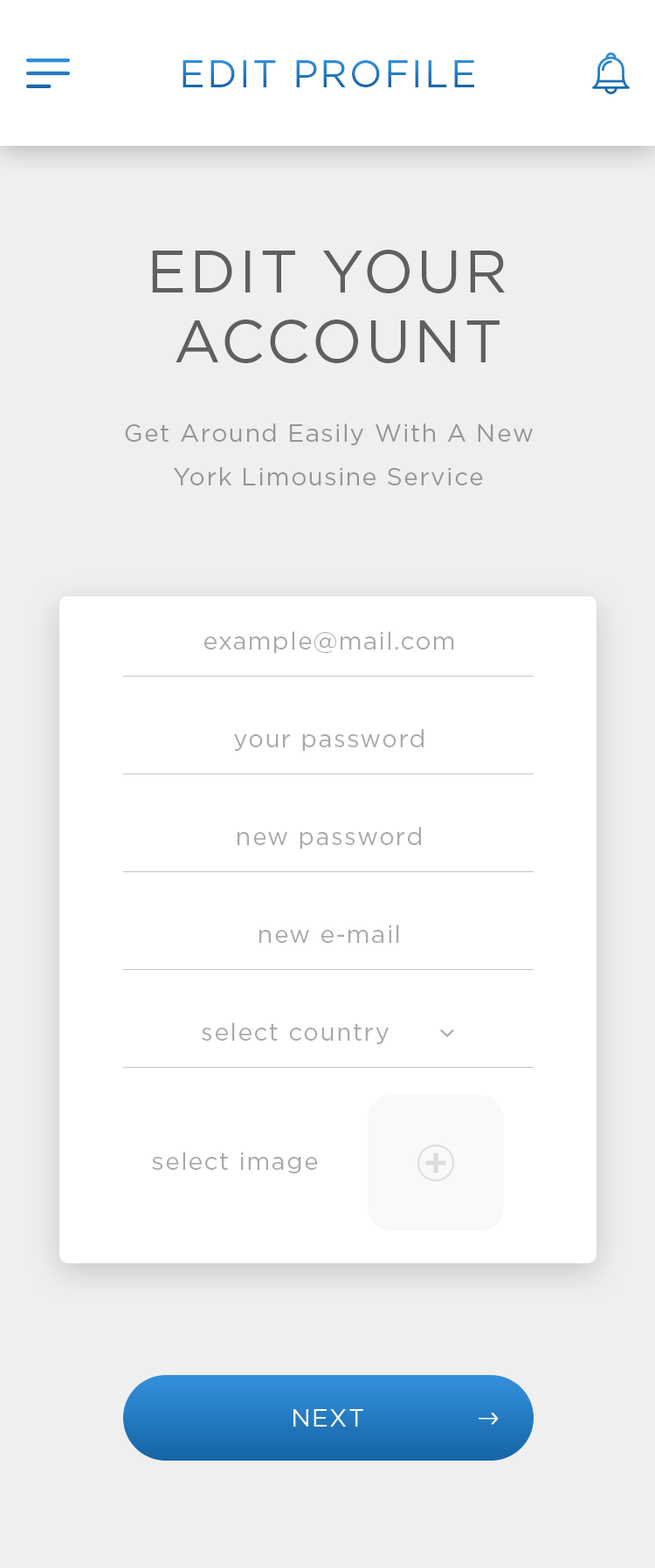
<style>
.page{position:relative;width:655px;height:1568px;background:#efefef}
.page>*{position:absolute;margin:0}
.t1{font:38.4px "Gotham-Book";letter-spacing:0.05em;text-transform:uppercase}
.t2{font:59.4px/69.8px "Gotham-Book";letter-spacing:0.05em;color:#5f5f5f;text-transform:uppercase}
.t3{font:24.4px/43.7px "Gotham-Book";letter-spacing:0.05em;color:#959595}
.t4{font:24.4px "Gotham-Book";letter-spacing:0.05em;color:#a9a9a9}
.t5{font:24.4px "Gotham-Book";letter-spacing:0.05em;color:#ffffff;text-transform:uppercase}
</style>
<div class="page">
<p class="t1" style="left:182px;top:60px;width:292px;height:27px">EDIT PROFILE</p>
<p class="t2" style="left:152px;top:250px;width:353px;height:113px;text-align:center">EDIT your <br>account</p>
<p class="t3" style="left:125px;top:423px;width:408px;height:62px;text-align:center">Get Around Easily With A New York Limousine Service</p>
<p class="t4" style="left:204px;top:631px;width:250px;height:22px">example@mail.com</p>
<p class="t4" style="left:234px;top:729px;width:189px;height:22px">your password</p>
<p class="t4" style="left:237px;top:827px;width:184px;height:22px">new password</p>
<p class="t4" style="left:259px;top:925px;width:140px;height:18px">new e-mail</p>
<p class="t4" style="left:202px;top:1022px;width:187px;height:22px">select country</p>
<p class="t4" style="left:152px;top:1152px;width:166px;height:21px">select image</p>
<p class="t5" style="left:293px;top:1409px;width:70px;height:18px">next</p>
</div>
